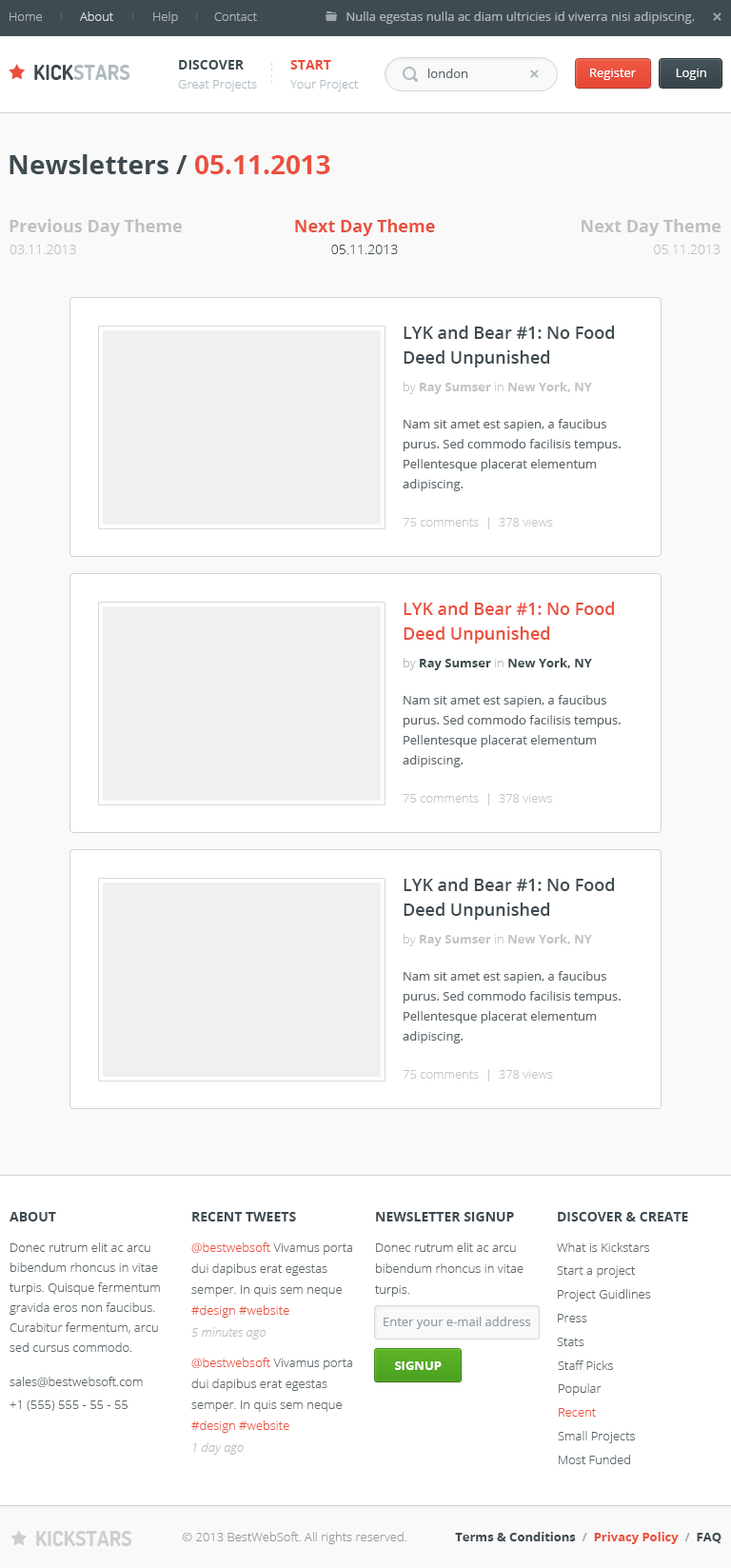
<style>
.page{position:relative;width:731px;height:1568px;background:#ffffff}
.page>*{position:absolute;margin:0}
.t1{font:12.4px "OpenSans-Light";color:#b0b4b6}
.t2{font:12.4px "OpenSans-Light";color:#e1e3e3}
.t3{font:12.4px "OpenSans";color:#b0b4b6}
.t4{font:20.9px "Dosis-Bold";color:#afbbc1;text-transform:uppercase}
.t5{font:20.9px "Dosis-Bold";color:#3e4b51;text-transform:uppercase}
.t6{font:13.3px "OpenSans-Bold";color:#3e4b51;text-transform:uppercase}
.t7{font:13.3px "OpenSans-Bold";color:#ea503d;text-transform:uppercase}
.t8{font:12.4px "OpenSans";color:#5c666b}
.t9{font:12.4px "OpenSans";color:#ffffff}
.t10{font:12.4px "OpenSans-Light";color:#afbbc1}
.t11{font:26.7px "OpenSans-Bold";color:#3e4b51}
.t12{font:26.7px "OpenSans-Bold";color:#ea503d}
.t13{font:17.1px "OpenSans-Bold";color:#bdc0c1}
.t14{font:17.1px "OpenSans-Bold";color:#ea503d}
.t15{font:13.3px "OpenSans-Light";color:#bdc0c1}
.t16{font:13.3px "OpenSans-Light";color:#3e4b51}
.t17{font:17.1px/24.8px "OpenSans-Semibold";color:#3e4b51}
.t18{font:12.4px "OpenSans-Bold";color:#c1c4c5}
.t19{font:12.4px "OpenSans-Light";color:#c1c4c5}
.t20{font:12.4px/20px "OpenSans";color:#5c666b}
.t21{font:17.1px/24.8px "OpenSans-Semibold";color:#ea503d}
.t22{font:12.4px "OpenSans-Bold";color:#3e4b51}
.t23{font:12.4px "OpenSans-Light";color:#b2b7b9}
.t24{font:13.3px "OpenSans-Bold";color:#3e4a51;text-transform:uppercase}
.t25{font:12.4px/20px "OpenSans-Light";color:#5c666b}
.t26{font:12.4px/20.9px "OpenSans-Light";color:#5c666b}
.t27{font:12.4px/20.9px "OpenSans-Light";color:#ea503d}
.t28{font:12.4px "OpenSans-Light";color:#5c666b}
.t29{font:12.4px "OpenSans";color:#909da3}
.t30{font:12.4px "OpenSansLight-Italic";color:#b9bcbe}
.t31{font:12.4px "OpenSans-Bold";color:#ffffff;text-transform:uppercase}
.t32{font:12.4px "OpenSans-Light";color:#ea503d}
.t33{font:20.9px "Dosis-Bold";color:#cecece;text-transform:uppercase}
.t34{font:12.4px "OpenSans-Light";color:#999999}
.t35{font:12.4px "OpenSans-Bold";color:#3e4a51}
.t36{font:12.4px "OpenSans-Bold";color:#aeaeae}
.t37{font:12.4px "OpenSans-Bold";color:#ea503d}
</style>
<div class="page">
<p class="t1" style="left:10px;top:12px;width:32px;height:9px">Home</p>
<p class="t2" style="left:80px;top:11px;width:33px;height:10px">About</p>
<p class="t1" style="left:153px;top:11px;width:25px;height:13px">Help</p>
<p class="t1" style="left:214px;top:12px;width:43px;height:9px">Contact</p>
<p class="t3" style="left:347px;top:11px;width:348px;height:13px">Nulla egestas nulla ac diam ultricies id viverra nisi adipiscing.</p>
<p class="t4" style="left:34px;top:65px;width:96px;height:15px"><span class="t5">Kick</span>stars</p>
<p class="t6" style="left:179px;top:60px;width:65px;height:9px">Discover</p>
<p class="t7" style="left:290px;top:60px;width:41px;height:9px">Start</p>
<p class="t8" style="left:428px;top:69px;width:40px;height:9px">london</p>
<p class="t9" style="left:590px;top:69px;width:46px;height:11px">Register</p>
<p class="t9" style="left:676px;top:69px;width:30px;height:11px">Login</p>
<p class="t10" style="left:178px;top:80px;width:79px;height:11px">Great Projects</p>
<p class="t10" style="left:290px;top:80px;width:69px;height:11px">Your Project</p>
<p class="t11" style="left:10px;top:154px;width:320px;height:20px">Newsletters / <span class="t12">05.11.2013</span></p>
<p class="t13" style="left:10px;top:219px;width:172px;height:17px">Previous Day Theme</p>
<p class="t14" style="left:295px;top:219px;width:140px;height:17px">Next Day Theme</p>
<p class="t13" style="left:582px;top:219px;width:140px;height:17px">Next Day Theme</p>
<p class="t15" style="left:10px;top:245px;width:66px;height:9px">03.11.2013</p>
<p class="t16" style="left:331px;top:245px;width:67px;height:9px">05.11.2013</p>
<p class="t15" style="left:654px;top:245px;width:67px;height:9px">05.11.2013</p>
<p class="t17" style="left:404px;top:326px;width:211px;height:41px">LYK and Bear #1: No Food Deed Unpunished</p>
<p class="t18" style="left:404px;top:382px;width:188px;height:12px"><span class="t19">by </span>Ray Sumser<span class="t19"> in </span>New York, NY</p>
<p class="t20" style="left:403px;top:419px;width:218px;height:72px">Nam sit amet est sapien, a faucibus purus. Sed commodo facilisis tempus. Pellentesque placerat elementum adipiscing.</p>
<p class="t19" style="left:403px;top:517px;width:150px;height:12px">75 comments  |  378 views</p>
<p class="t21" style="left:404px;top:602px;width:211px;height:42px">LYK and Bear #1: No Food Deed Unpunished</p>
<p class="t22" style="left:404px;top:658px;width:188px;height:12px"><span class="t23">by </span>Ray Sumser<span class="t23"> in </span>New York, NY</p>
<p class="t20" style="left:403px;top:695px;width:218px;height:72px">Nam sit amet est sapien, a faucibus purus. Sed commodo facilisis tempus. Pellentesque placerat elementum adipiscing.</p>
<p class="t19" style="left:403px;top:793px;width:150px;height:12px">75 comments  |  378 views</p>
<p class="t17" style="left:404px;top:878px;width:211px;height:42px">LYK and Bear #1: No Food Deed Unpunished</p>
<p class="t18" style="left:404px;top:934px;width:188px;height:12px"><span class="t19">by </span>Ray Sumser<span class="t19"> in </span>New York, NY</p>
<p class="t20" style="left:403px;top:971px;width:218px;height:72px">Nam sit amet est sapien, a faucibus purus. Sed commodo facilisis tempus. Pellentesque placerat elementum adipiscing.</p>
<p class="t19" style="left:403px;top:1069px;width:150px;height:13px">75 comments  |  378 views</p>
<p class="t24" style="left:10px;top:1212px;width:46px;height:9px">About</p>
<p class="t24" style="left:192px;top:1212px;width:104px;height:9px">Recent Tweets</p>
<p class="t24" style="left:376px;top:1212px;width:138px;height:9px">Newsletter Signup</p>
<p class="t24" style="left:558px;top:1212px;width:130px;height:9px">Discover &amp; Create</p>
<p class="t25" style="left:10px;top:1242px;width:150px;height:110px">Donec rutrum elit ac arcu bibendum rhoncus in vitae turpis. Quisque fermentum gravida eros non faucibus. Curabitur fermentum, arcu sed cursus commodo.</p>
<p class="t26" style="left:191px;top:1242px;width:161px;height:76px"><span class="t27">@bestwebsoft</span> Vivamus porta dui dapibus erat egestas semper. In quis sem neque <span class="t27">#design #website</span></p>
<p class="t26" style="left:375px;top:1242px;width:149px;height:55px">Donec rutrum elit ac arcu bibendum rhoncus in vitae turpis.</p>
<p class="t28" style="left:557px;top:1242px;width:92px;height:10px">What is Kickstars</p>
<p class="t28" style="left:557px;top:1266px;width:79px;height:12px">Start a project</p>
<p class="t28" style="left:558px;top:1289px;width:93px;height:12px">Project Guidlines</p>
<p class="t28" style="left:558px;top:1314px;width:29px;height:8px">Press</p>
<p class="t29" style="left:384px;top:1317px;width:147px;height:12px">Enter your e-mail address</p>
<p class="t30" style="left:191px;top:1327px;width:76px;height:13px">5 minutes ago</p>
<p class="t28" style="left:557px;top:1338px;width:28px;height:8px">Stats</p>
<p class="t26" style="left:191px;top:1358px;width:161px;height:75px"><span class="t27">@bestwebsoft</span> Vivamus porta dui dapibus erat egestas semper. In quis sem neque <span class="t27">#design #website</span></p>
<p class="t31" style="left:395px;top:1361px;width:47px;height:9px">Signup</p>
<p class="t28" style="left:558px;top:1360px;width:55px;height:10px">Staff Picks</p>
<p class="t28" style="left:10px;top:1377px;width:133px;height:10px">sales@bestwebsoft.com</p>
<p class="t28" style="left:559px;top:1383px;width:43px;height:13px">Popular</p>
<p class="t28" style="left:10px;top:1400px;width:118px;height:11px">+1 (555) 555 - 55 - 55</p>
<p class="t32" style="left:559px;top:1408px;width:37px;height:9px">Recent</p>
<p class="t28" style="left:558px;top:1431px;width:77px;height:12px">Small Projects</p>
<p class="t30" style="left:193px;top:1442px;width:51px;height:13px">1 day ago</p>
<p class="t28" style="left:559px;top:1455px;width:71px;height:9px">Most Funded</p>
<p class="t33" style="left:36px;top:1531px;width:96px;height:15px">Kickstars</p>
<p class="t34" style="left:182px;top:1532px;width:225px;height:12px">© 2013 BestWebSoft. All rights reserved.</p>
<p class="t35" style="left:455px;top:1532px;width:267px;height:12px">Terms &amp; Conditions <span class="t36"> /  </span><span class="t37">Privacy Policy  </span><span class="t36">/</span>  FAQ</p>
</div>
